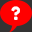
<style>
.page{position:relative;width:32px;height:32px;background:#ff0000}
.page>*{position:absolute;margin:0}
.t1{font:18px "FredokaOne-Regular";color:#ffffff}
</style>
<div class="page">
<p class="t1" style="left:11px;top:6px;width:9px;height:14px">?</p>
</div>
